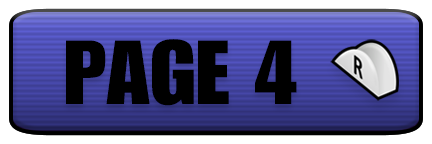
<style>
.page{position:relative;width:432px;height:144px}
.page>*{position:absolute;margin:0}
.t1{font:89px "Genuine2Regular";color:#000000;text-transform:uppercase;scale:1.07 1}
</style>
<div class="page">
<p class="t1" style="left:66px;top:39px;width:231px;height:67px">Page 4</p>
</div>
